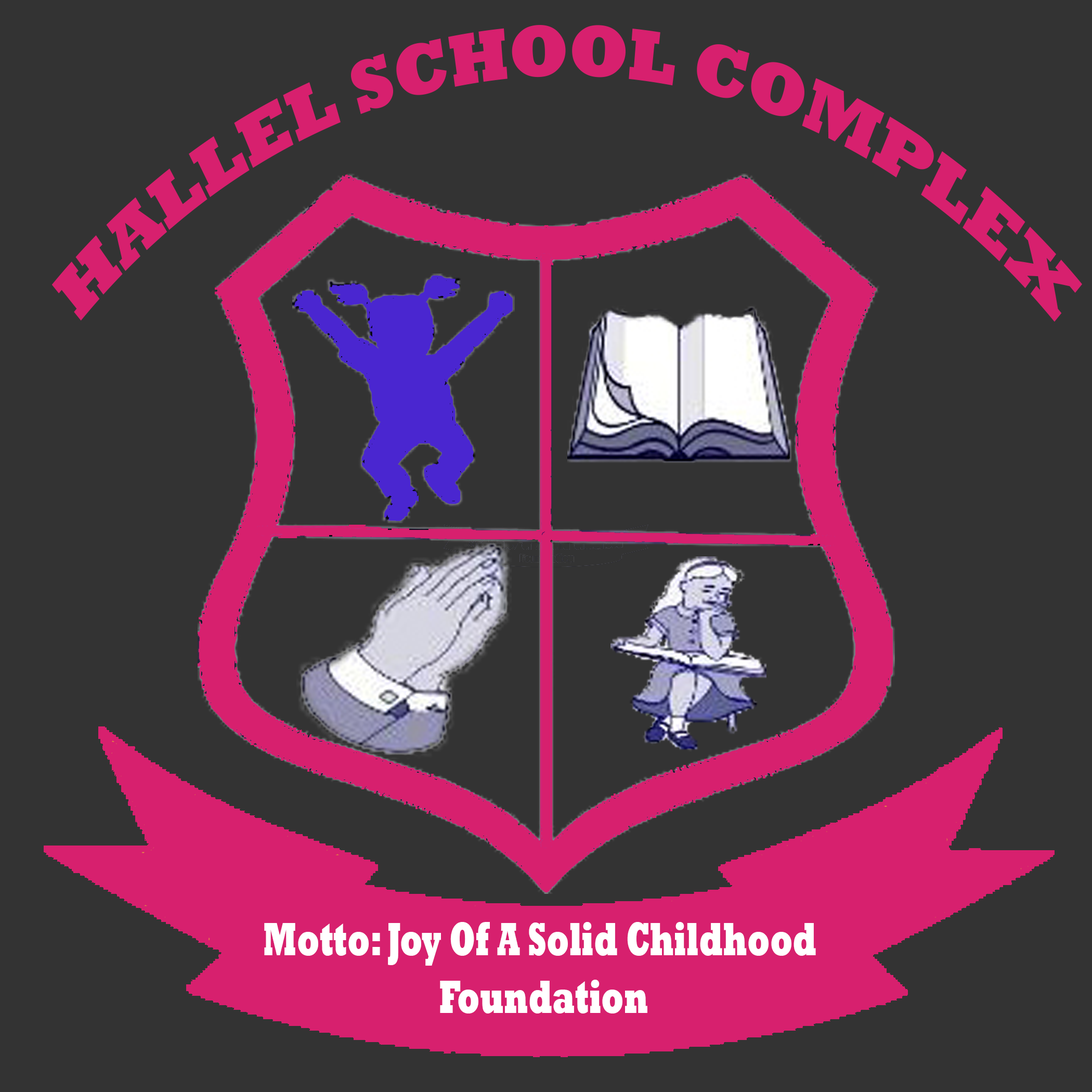
<style>
.page{position:relative;width:1092px;height:1092px;background:#333333}
.page>*{position:absolute;margin:0}
.t1{font:74.2px "Rockwell-ExtraBold";color:#d7206e;scale:0.82 1}
.t2{font:47.9px "Rockwell-ExtraBold";color:#ffffff;scale:0.63 1}
</style>
<div class="page">
<p class="t1" style="left:51px;top:25px;width:1031px;height:297px">HALLEL SCHOOL COMPLEX</p>
<p class="t2" style="left:264px;top:922px;width:552px;height:91px;text-align:center">Motto: Joy Of A Solid Childhood <br>Foundation</p>
</div>
